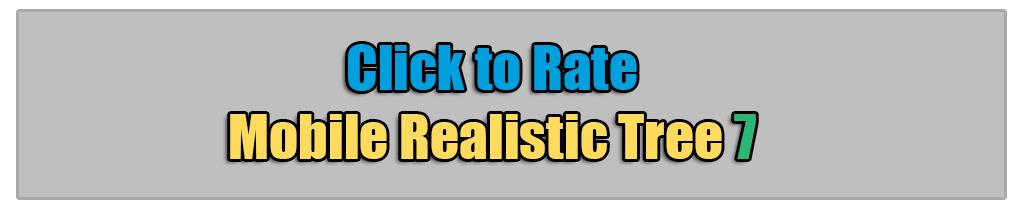
<style>
.page{position:relative;width:1024px;height:210px;background:#bfbfbf}
.page>*{position:absolute;margin:0}
.t1{font:57.3px "Impact";color:#ffdb5d}
.t2{font:57.3px "Impact";color:#009fde}
.t3{font:57.3px "Impact";color:#2cb673}
</style>
<div class="page">
<p class="t1" style="left:230px;top:44px;width:526px;height:115px;text-align:center"><span class="t2">Click to Rate<br></span>Mobile Realistic Tree <span class="t3">7</span></p>
</div>
